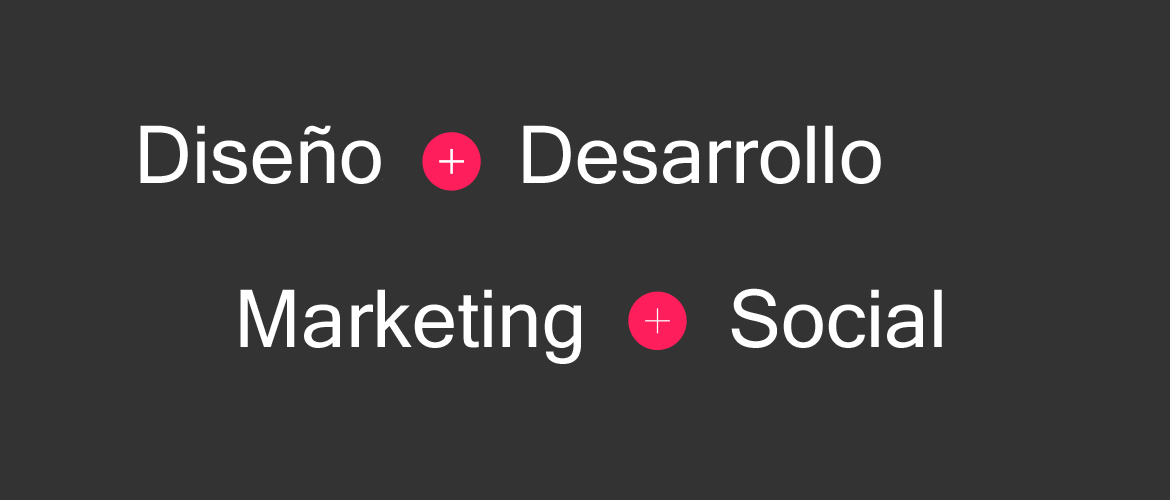
<style>
.page{position:relative;width:1170px;height:500px;background:#333333}
.page>*{position:absolute;margin:0}
.t1{font:18px "MicrosoftSansSerif";color:#ffffff}
.t2{font:80px "MicrosoftSansSerif";color:#ffffff}
</style>
<div class="page">
<p class="t1" style="left:140px;top:125px;width:241px;height:59px"><span class="t2">Diseñoo</span>mmodo viverra maecenas accumsan lacus vel facilisis.</p>
<p class="t1" style="left:523px;top:125px;width:358px;height:59px"><span class="t2">Desarrolloo</span>mmodo viverra maecenas accumsan lacus vel facilisis.</p>
<p class="t2" style="left:240px;top:289px;width:341px;height:75px">Marketing</p>
<p class="t2" style="left:731px;top:288px;width:211px;height:60px">Social</p>
</div>
